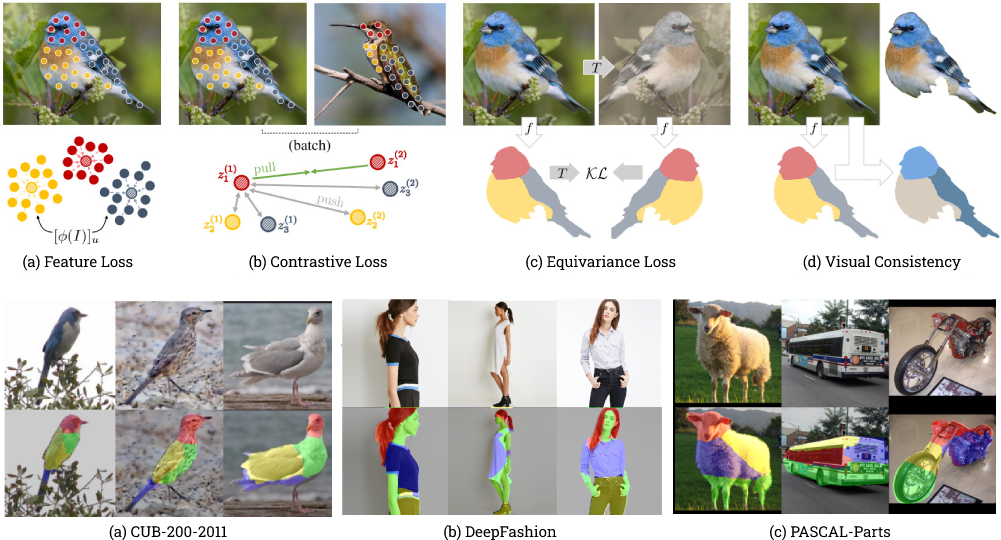
<style>
.page{position:relative;width:1001px;height:540px;background:#ffffff}
.page>*{position:absolute;margin:0}
.t1{font:15px "RobotoSlab-Regular";color:#000000}
</style>
<div class="page">
<p class="t1" style="left:23px;top:255px;width:938px;height:16px">(a) Feature Loss                               (b) Contrastive Loss                                     (c) Equivariance Loss                                  (d) Visual Consistency</p>
<p class="t1" style="left:109px;top:525px;width:782px;height:16px">(a) CUB-200-2011                                                          (b) DeepFashion                                                         (c) PASCAL-Parts</p>
</div>
